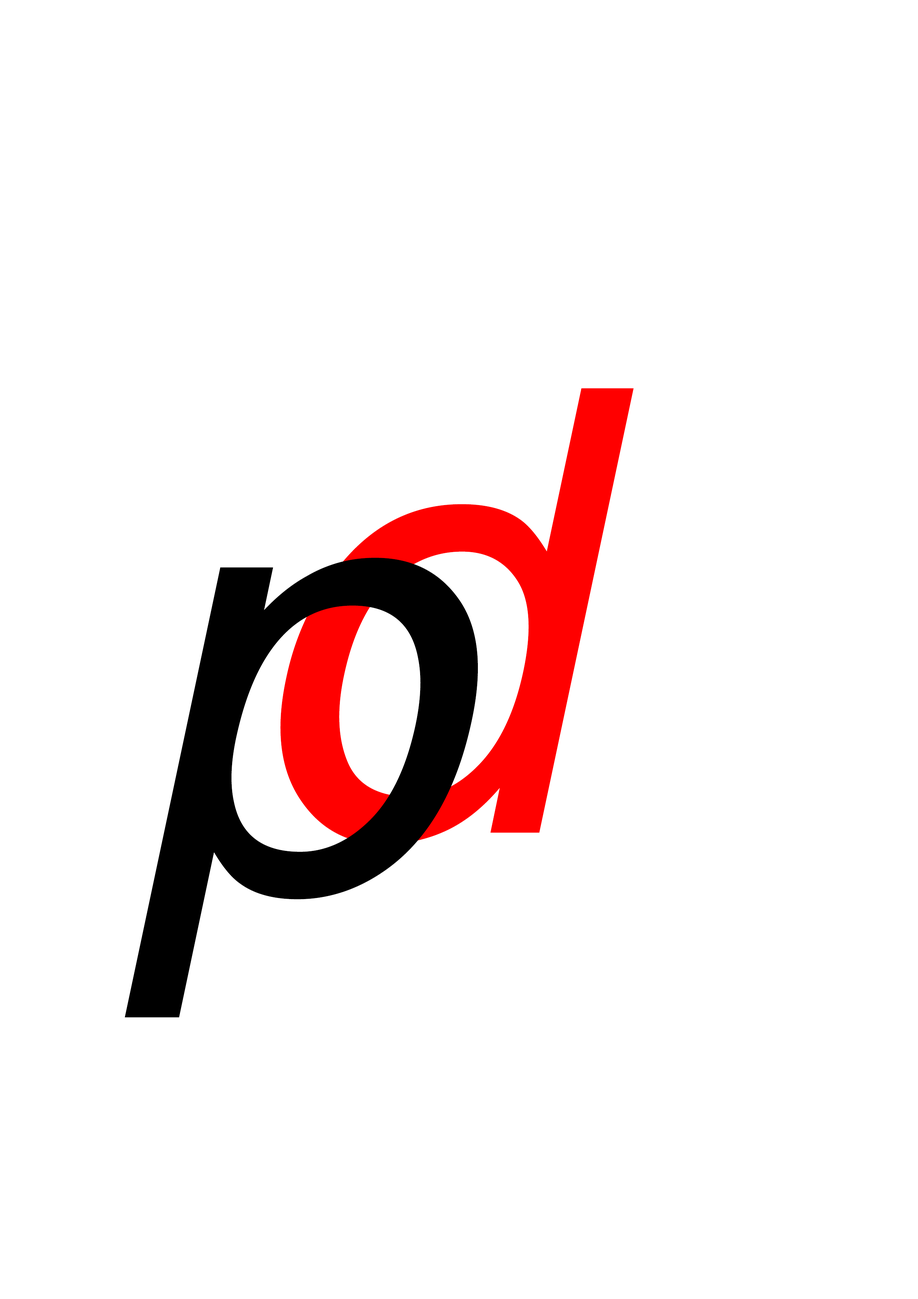
<style>
.page{position:relative;width:918px;height:1299px;background:#ffffff}
.page>*{position:absolute;margin:0}
.t1{font:617px "Helvetica-Oblique";color:#ff0000}
.t2{font:617px "Helvetica-Oblique";color:#000000}
</style>
<div class="page">
<p class="t1" style="left:280px;top:388px;width:354px;height:456px">d</p>
<p class="t2" style="left:125px;top:558px;width:353px;height:459px">p</p>
</div>
